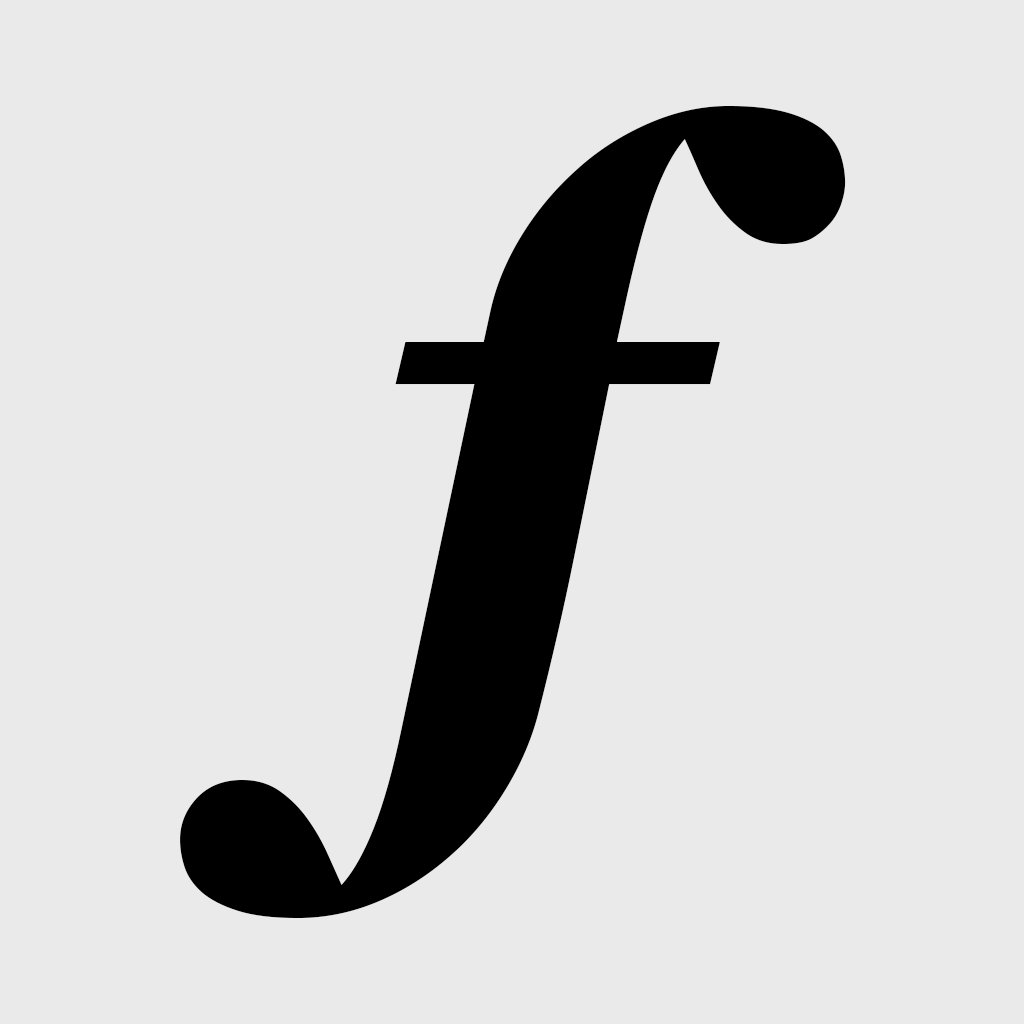
<style>
.page{position:relative;width:1024px;height:1024px;background:#eaeaea}
.page>*{position:absolute;margin:0}
.t1{font:833.3px "Georgia-BoldItalic";color:#000000}
</style>
<div class="page">
<p class="t1" style="left:180px;top:106px;width:666px;height:812px">f</p>
</div>
